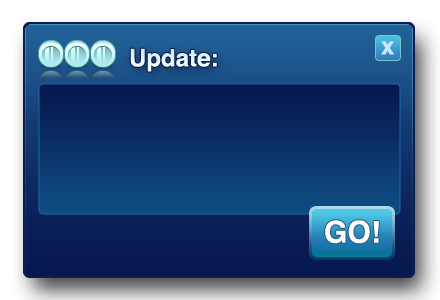
<style>
.page{position:relative;width:440px;height:300px}
.page>*{position:absolute;margin:0}
.t1{font:24px "Helvetica-Bold";color:#cbe8ff}
.t2{font:24px "Helvetica-Bold";color:#e5f6ff}
.t3{font:30px "Helvetica-Bold";color:#ffffff}
</style>
<div class="page">
<p class="t1" style="left:381px;top:41px;width:13px;height:14px">x</p>
<p class="t2" style="left:130px;top:48px;width:87px;height:24px">Update:</p>
<p class="t3" style="left:325px;top:220px;width:54px;height:24px">GO!</p>
</div>
